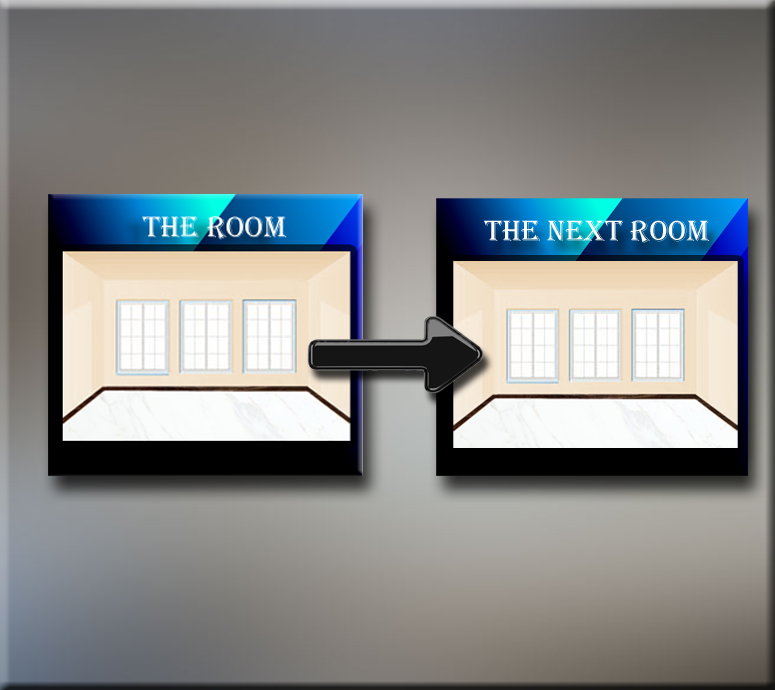
<style>
.page{position:relative;width:775px;height:690px}
.page>*{position:absolute;margin:0}
.t1{font:30.2px "Algerian";color:#ffffff}
</style>
<div class="page">
<p class="t1" style="left:484px;top:220px;width:226px;height:23px">The Next Room</p>
</div>
